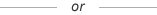
<style>
.page{position:relative;width:157px;height:15px;background:#ffffff}
.page>*{position:absolute;margin:0}
.t1{font:24px "Arial-ItalicMT";letter-spacing:0.025em;color:#353636}
</style>
<div class="page">
<p class="t1" style="left:71px;top:3px;width:15px;height:9px">or</p>
</div>
